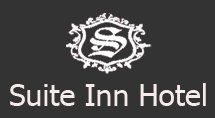
<style>
.page{position:relative;width:215px;height:118px;background:#333333}
.page>*{position:absolute;margin:0}
.t1{font:30px "Tahoma";color:#f6ebeb}
</style>
<div class="page">
<p class="t1" style="left:10px;top:83px;width:196px;height:23px">Suite Inn Hotel</p>
</div>
